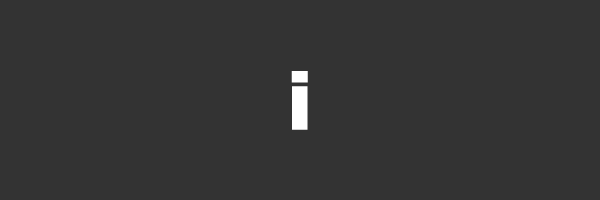
<style>
.page{position:relative;width:600px;height:200px;background:#333333}
.page>*{position:absolute;margin:0}
.t1{font:80px "Gotham-Black";color:#ffffff}
</style>
<div class="page">
<p class="t1" style="left:291px;top:71px;width:17px;height:59px">i</p>
</div>
